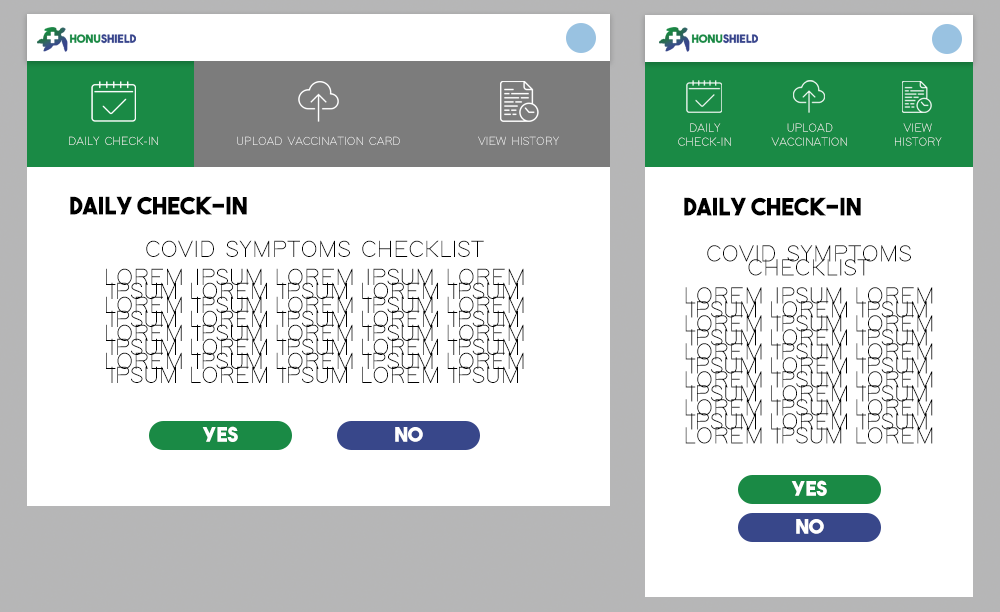
<style>
.page{position:relative;width:1000px;height:612px;background:#ffffff}
.page>*{position:absolute;margin:0}
.t1{font:12px/14px "ModernSansLight"}
.t2{font:12px "ModernSansLight"}
.t3{font:24px "TheBoldFont";color:#000000}
.t4{font:24px/14px "ModernSansLight";color:#000000}
.t5{font:20px "TheBoldFont";color:#ffffff}
</style>
<div class="page">
<p class="t1" style="left:678px;top:123px;width:53px;height:23px;text-align:center">DAILY<br>CHECK-IN</p>
<p class="t1" style="left:771px;top:123px;width:76px;height:23px;text-align:center">UPLOAD<br>VACCINATION</p>
<p class="t1" style="left:895px;top:123px;width:47px;height:23px;text-align:center">VIEW<br>HISTORY</p>
<p class="t2" style="left:69px;top:136px;width:490px;height:9px">DAILY CHECK-IN               UPLOAD VACCINATION CARD               VIEW HISTORY</p>
<p class="t3" style="left:70px;top:196px;width:177px;height:19px">Daily Check-in</p>
<p class="t3" style="left:684px;top:197px;width:177px;height:19px">Daily Check-in</p>
<p class="t4" style="left:106px;top:240px;width:418px;height:143px;text-align:center">COVID SYMPTOMS CHECKLIST<br><br>LOREM IPSUM LOREM IPSUM LOREM IPSUM LOREM IPSUM LOREM IPSUM LOREM IPSUM LOREM IPSUM LOREM IPSUM LOREM IPSUM LOREM IPSUM LOREM IPSUM LOREM IPSUM LOREM IPSUM LOREM IPSUM LOREM IPSUM LOREM IPSUM LOREM IPSUM LOREM IPSUM LOREM IPSUM LOREM IPSUM</p>
<p class="t4" style="left:685px;top:245px;width:248px;height:199px;text-align:center">COVID SYMPTOMS CHECKLIST<br><br>LOREM IPSUM LOREM IPSUM LOREM IPSUM LOREM IPSUM LOREM IPSUM LOREM IPSUM LOREM IPSUM LOREM IPSUM LOREM IPSUM LOREM IPSUM LOREM IPSUM LOREM IPSUM LOREM IPSUM LOREM IPSUM LOREM IPSUM LOREM IPSUM LOREM IPSUM LOREM IPSUM LOREM IPSUM LOREM IPSUM</p>
<p class="t5" style="left:202px;top:426px;width:36px;height:16px">YES</p>
<p class="t5" style="left:395px;top:427px;width:28px;height:15px">NO</p>
<p class="t5" style="left:791px;top:480px;width:36px;height:16px">YES</p>
<p class="t5" style="left:796px;top:519px;width:28px;height:15px">NO</p>
</div>
